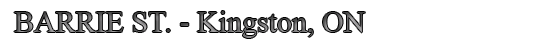
<style>
.page{position:relative;width:544px;height:46px;background:#ffffff}
.page>*{position:absolute;margin:0}
.t1{font:30px "TimesNewRomanPSMT"}
</style>
<div class="page">
<p class="t1" style="left:14px;top:11px;width:351px;height:27px">BARRIE ST. - Kingston, ON</p>
</div>
